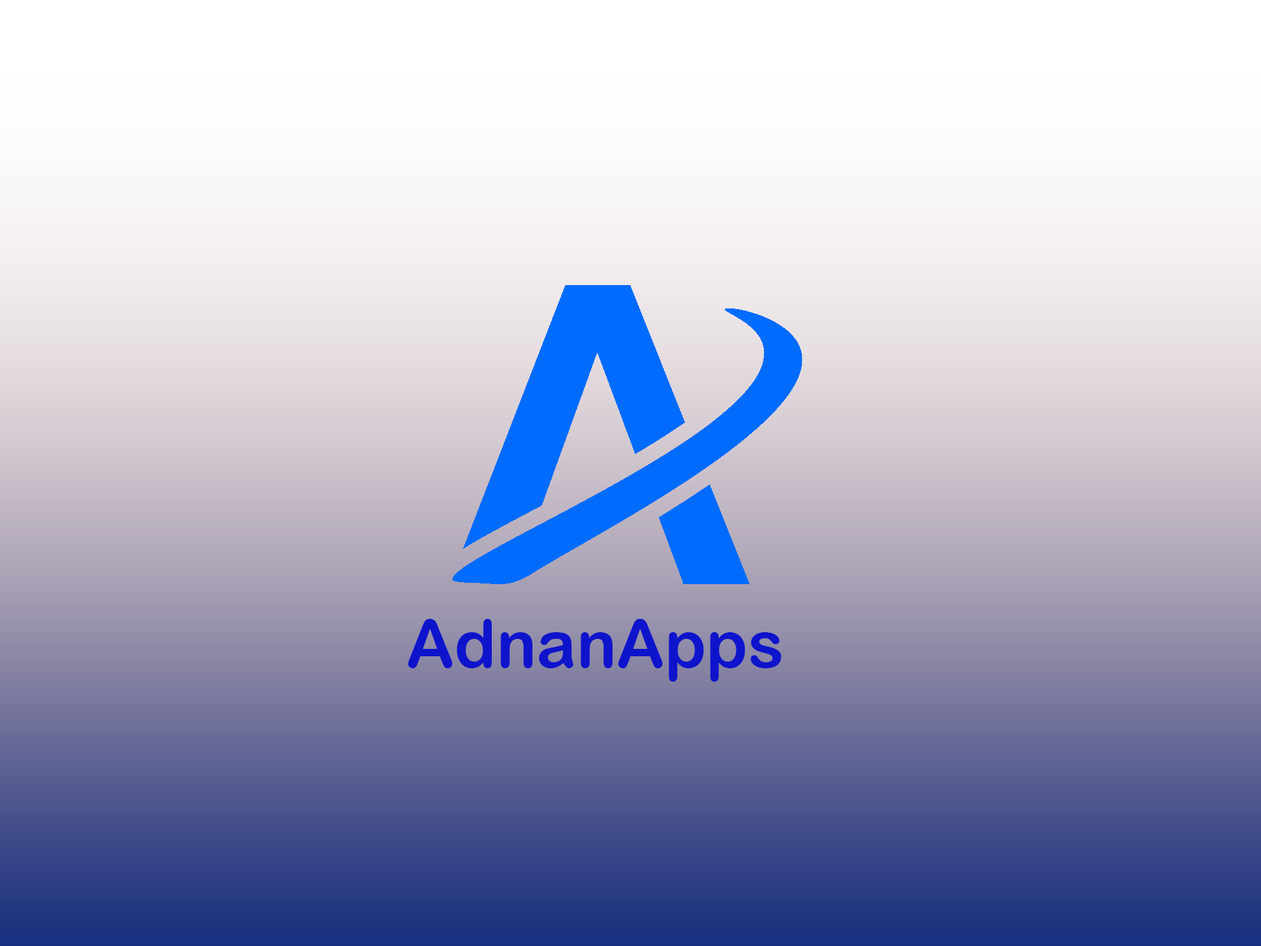
<style>
.page{position:relative;width:1261px;height:946px}
.page>*{position:absolute;margin:0}
.t1{font:66.7px "ArialRoundedMTBold";color:#0e14cc}
</style>
<div class="page">
<p class="t1" style="left:408px;top:619px;width:373px;height:62px">AdnanApps</p>
</div>
